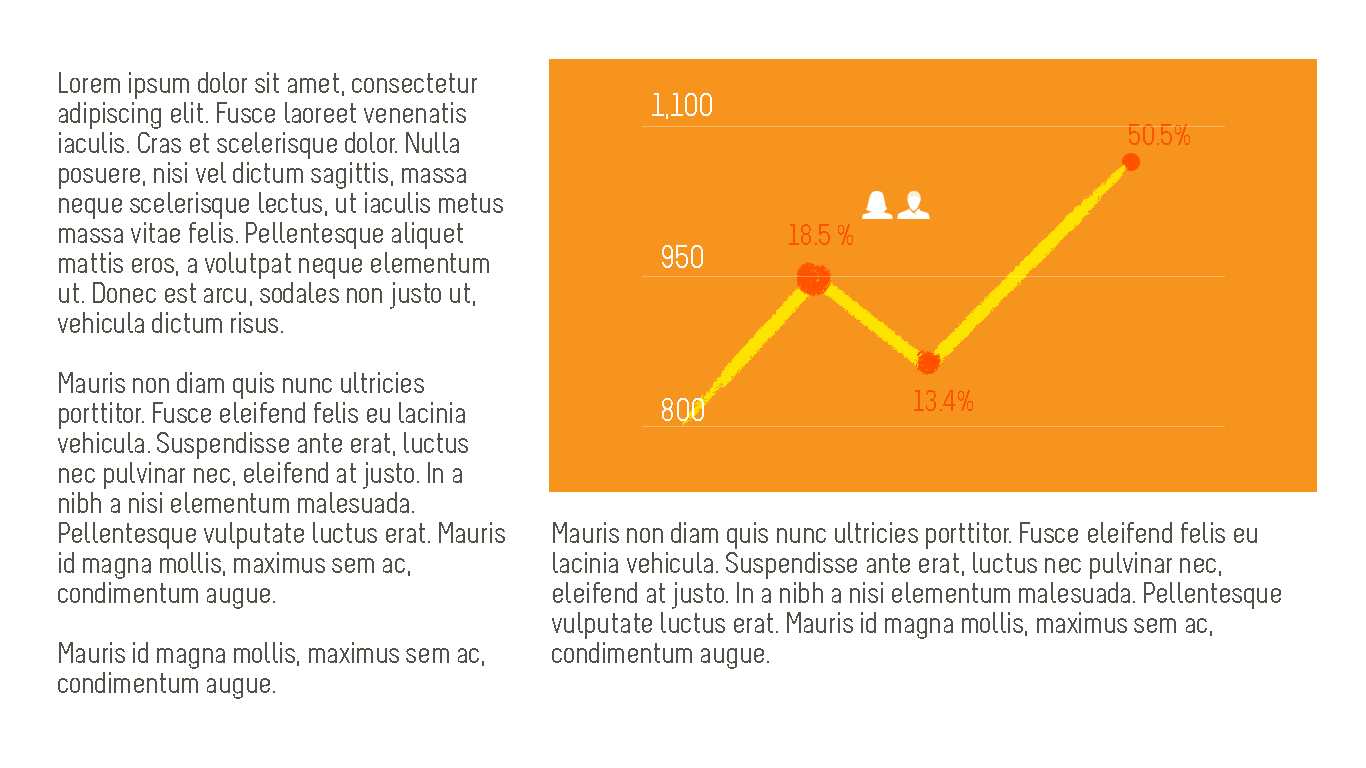
<style>
.page{position:relative;width:1366px;height:768px;background:#ffffff}
.page>*{position:absolute;margin:0}
.t1{font:30px/30px "Melbourne";letter-spacing:-0.015em;color:#51534a}
.t2{font:32.7px "Melbourne";letter-spacing:-0.015em;color:#ffffff;text-transform:uppercase}
.t3{font:30px "Melbourne";letter-spacing:-0.015em;color:#ff5200;text-transform:uppercase}
</style>
<div class="page">
<p class="t1" style="left:58px;top:72px;width:447px;height:627px">Lorem ipsum dolor sit amet, consectetur adipiscing elit. Fusce laoreet venenatis iaculis. Cras et scelerisque dolor. Nulla posuere, nisi vel dictum sagittis, massa neque scelerisque lectus, ut iaculis metus massa vitae felis. Pellentesque aliquet mattis eros, a volutpat neque elementum ut. Donec est arcu, sodales non justo ut, vehicula dictum risus. <br><br>Mauris non diam quis nunc ultricies porttitor. Fusce eleifend felis eu lacinia vehicula. Suspendisse ante erat, luctus nec pulvinar nec, eleifend at justo. In a nibh a nisi elementum malesuada. Pellentesque vulputate luctus erat. Mauris id magna mollis, maximus sem ac, condimentum augue.<br><br>Mauris id magna mollis, maximus sem ac, condimentum augue.</p>
<p class="t2" style="left:652px;top:93px;width:60px;height:26px">1,100</p>
<p class="t3" style="left:1129px;top:124px;width:61px;height:21px">50.5%</p>
<p class="t3" style="left:789px;top:224px;width:64px;height:21px">18.5 %</p>
<p class="t2" style="left:662px;top:245px;width:41px;height:23px">950</p>
<p class="t3" style="left:914px;top:390px;width:59px;height:21px">13.4%</p>
<p class="t2" style="left:662px;top:398px;width:42px;height:23px">800</p>
<p class="t1" style="left:552px;top:522px;width:729px;height:147px">Mauris non diam quis nunc ultricies porttitor. Fusce eleifend felis eu lacinia vehicula. Suspendisse ante erat, luctus nec pulvinar nec, eleifend at justo. In a nibh a nisi elementum malesuada. Pellentesque vulputate luctus erat. Mauris id magna mollis, maximus sem ac, condimentum augue.</p>
</div>
